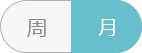
<style>
.page{position:relative;width:142px;height:53px;background:#69becd}
.page>*{position:absolute;margin:0}
.t1{font:20px "MicrosoftYaHei";color:#8c8c8c}
.t2{font:20px "MicrosoftYaHei";color:#ffffff}
</style>
<div class="page">
<p class="t1" style="left:27px;top:19px;width:19px;height:18px">周</p>
<p class="t2" style="left:98px;top:19px;width:17px;height:17px">月</p>
</div>
